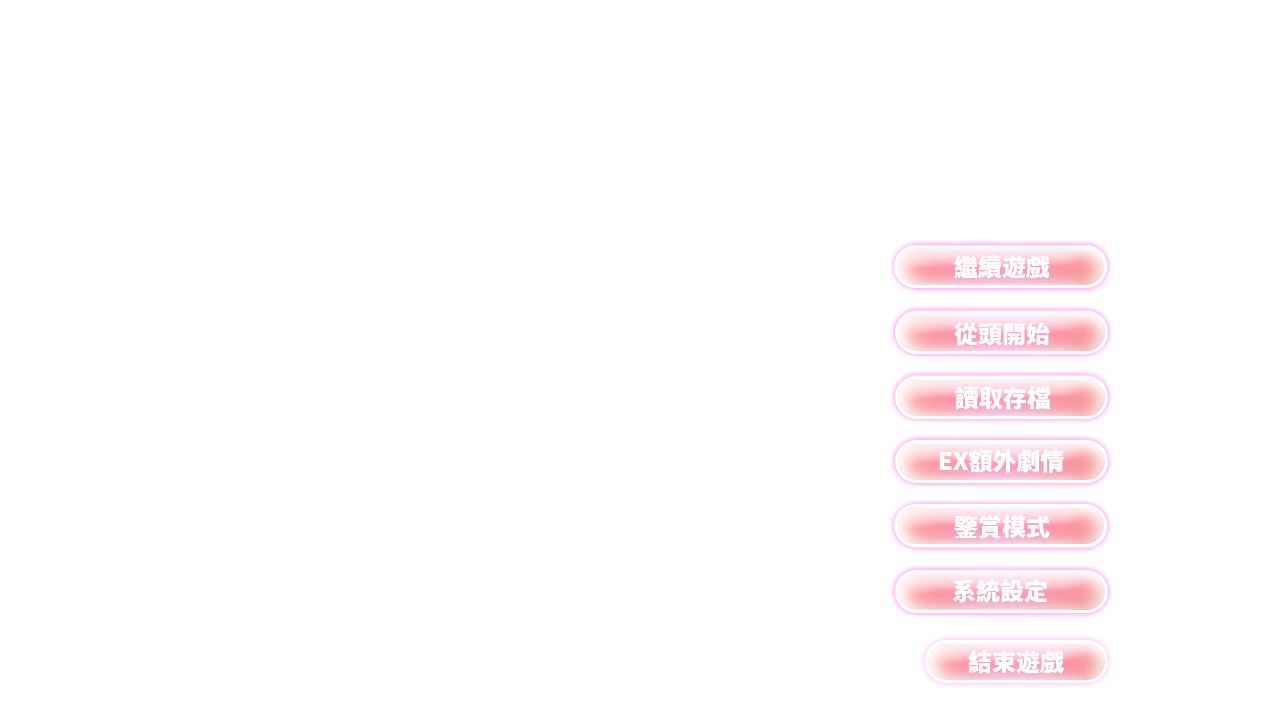
<style>
.page{position:relative;width:1280px;height:720px;background:#ffffff}
.page>*{position:absolute;margin:0}
.t1{font:24px "SourceHanSansCN-Heavy";color:#ffffff}
</style>
<div class="page">
<p class="t1" style="left:954px;top:255px;width:95px;height:24px">繼續遊戲</p>
<p class="t1" style="left:954px;top:322px;width:96px;height:24px">從頭開始</p>
<p class="t1" style="left:955px;top:386px;width:95px;height:24px">讀取存檔</p>
<p class="t1" style="left:939px;top:449px;width:125px;height:24px">EX額外劇情</p>
<p class="t1" style="left:954px;top:515px;width:96px;height:24px">鑒賞模式</p>
<p class="t1" style="left:952px;top:579px;width:96px;height:24px">系統設定</p>
<p class="t1" style="left:968px;top:650px;width:96px;height:24px">結束遊戲</p>
</div>
